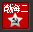
<style>
.page{position:relative;width:33px;height:32px;background:#c50000}
.page>*{position:absolute;margin:0}
.t1{font:10.4px "SimSun";letter-spacing:-0.25em;color:#ffffff}
</style>
<div class="page">
<p class="t1" style="left:4px;top:4px;width:24px;height:9px">渤海二</p>
</div>
